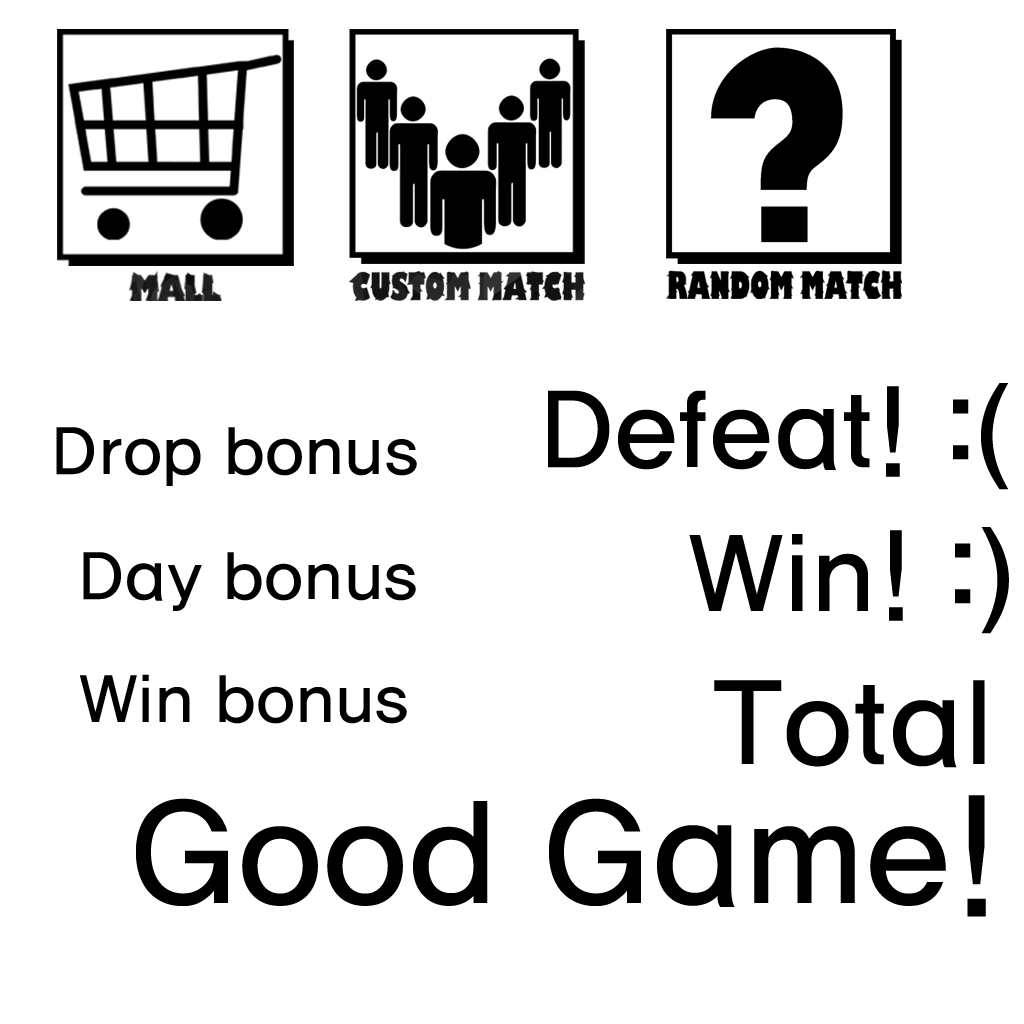
<style>
.page{position:relative;width:1024px;height:1024px;background:#ffffff}
.page>*{position:absolute;margin:0}
.t1{font:111.9px "HaanYGodic23";letter-spacing:-0.065em;color:#000000}
.t2{font:68.9px "HaanYGodic23";letter-spacing:-0.065em;color:#000000}
.t3{font:123px "HaanYGodic23";letter-spacing:-0.065em;color:#000000}
.t4{font:150.1px "HaanYGodic23";letter-spacing:-0.065em;color:#000000}
</style>
<div class="page">
<p class="t1" style="left:548px;top:383px;width:461px;height:107px">Defeat! :(</p>
<p class="t2" style="left:56px;top:427px;width:361px;height:59px">Drop bonus</p>
<p class="t1" style="left:689px;top:527px;width:320px;height:107px">Win! :)</p>
<p class="t2" style="left:83px;top:552px;width:333px;height:59px">Day bonus</p>
<p class="t2" style="left:79px;top:674px;width:328px;height:50px">Win bonus</p>
<p class="t3" style="left:714px;top:680px;width:271px;height:88px">Total</p>
<p class="t4" style="left:136px;top:795px;width:850px;height:122px">Good Game!</p>
</div>
